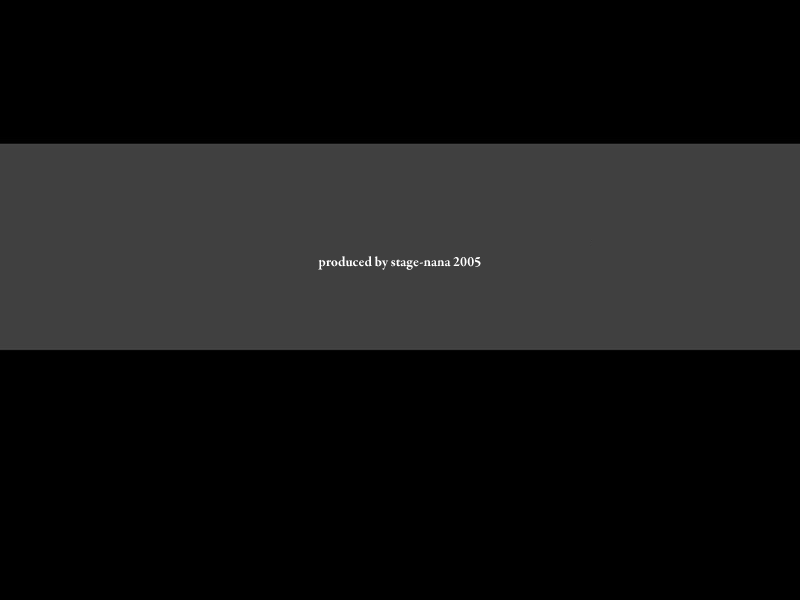
<style>
.page{position:relative;width:800px;height:600px;background:#000000}
.page>*{position:absolute;margin:0}
.t1{font:14px "GaramondPremrPro-Bd";color:#ffffff}
</style>
<div class="page">
<p class="t1" style="left:318px;top:256px;width:163px;height:14px">produced by stage-nana 2005</p>
</div>
